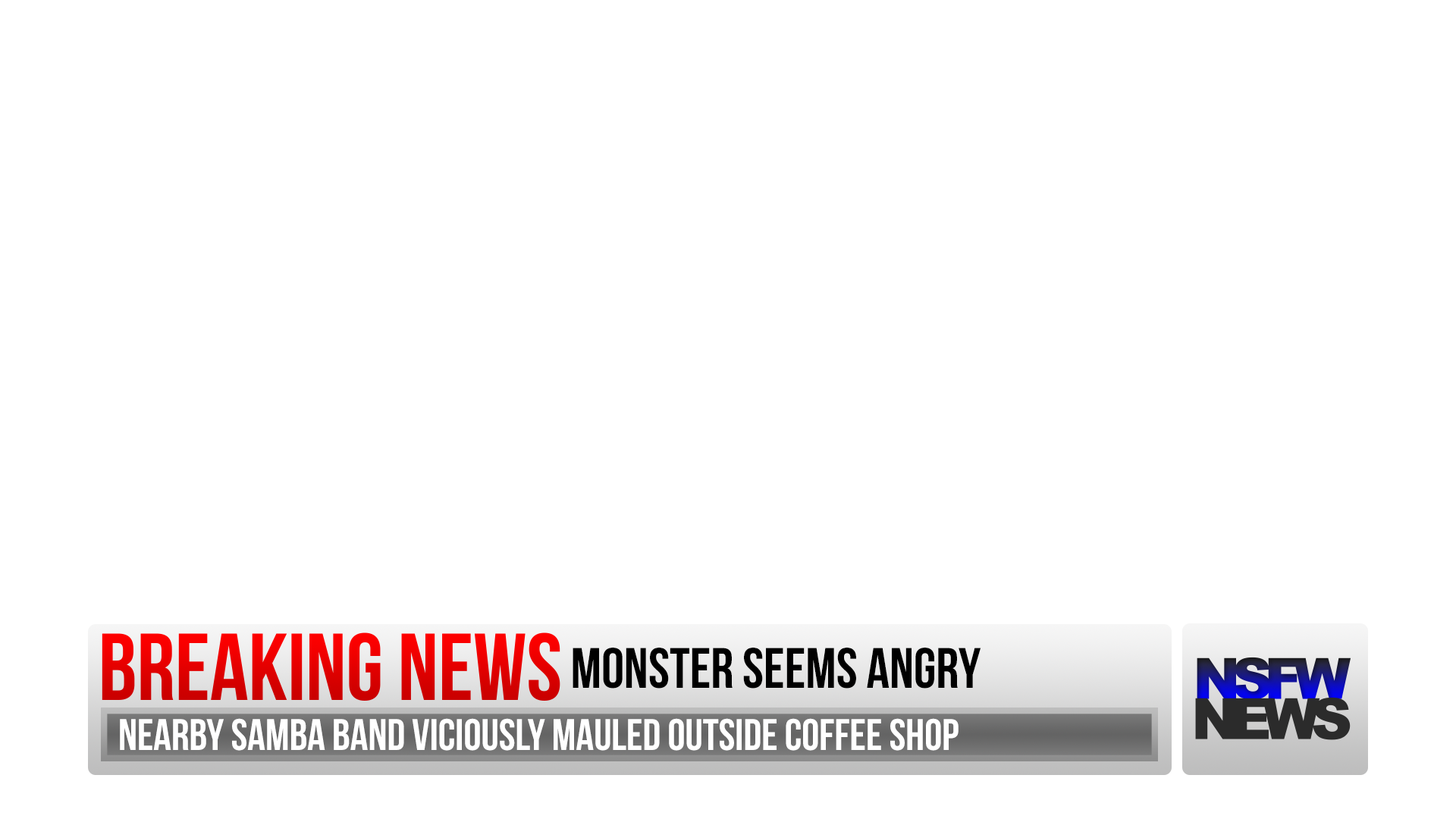
<style>
.page{position:relative;width:1456px;height:819px;background:#ffffff}
.page>*{position:absolute;margin:0}
.t1{font:56.9px "BebasNeue";color:#000000}
.t2{font:44.2px "BebasNeue";color:#ffffff}
</style>
<div class="page">
<p class="t1" style="left:573px;top:648px;width:408px;height:41px">monster seems angry</p>
<p class="t2" style="left:120px;top:718px;width:839px;height:33px">nearby samba band viciously mauled outside coffee shop</p>
</div>
